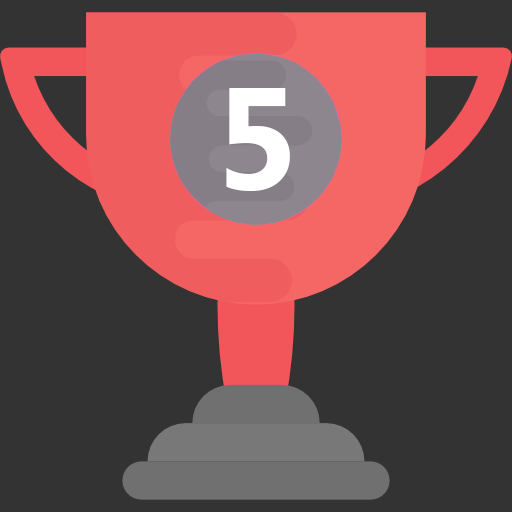
<style>
.page{position:relative;width:512px;height:512px;background:#333333}
.page>*{position:absolute;margin:0}
.t1{font:144.4px "MyanmarText-Bold";color:#ffffff}
</style>
<div class="page">
<p class="t1" style="left:226px;top:88px;width:64px;height:103px">5</p>
</div>
